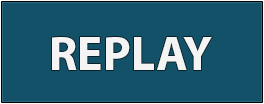
<style>
.page{position:relative;width:264px;height:104px;background:#125167}
.page>*{position:absolute;margin:0}
.t1{font:48px "MyriadHebrew-Bold";color:#f4f4f4}
</style>
<div class="page">
<p class="t1" style="left:52px;top:37px;width:160px;height:33px">REPLAY</p>
</div>
